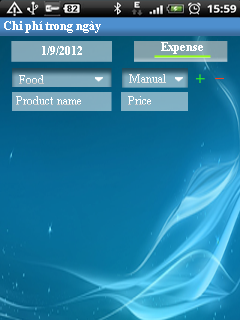
<style>
.page{position:relative;width:240px;height:320px}
.page>*{position:absolute;margin:0}
.t1{font:11.6px "TimesNewRomanPS-BoldMT";color:#ffffff}
.t2{font:11.6px "TimesNewRomanPSMT";color:#ffffff}
</style>
<div class="page">
<p class="t1" style="left:4px;top:21px;width:97px;height:12px">Chi phí trong ngày</p>
<p class="t1" style="left:42px;top:46px;width:40px;height:9px">1/9/2012</p>
<p class="t1" style="left:161px;top:42px;width:42px;height:12px">Expense</p>
<p class="t2" style="left:19px;top:75px;width:25px;height:9px">Food</p>
<p class="t2" style="left:129px;top:74px;width:37px;height:9px">Manual</p>
<p class="t2" style="left:16px;top:96px;width:65px;height:9px">Product name</p>
<p class="t2" style="left:128px;top:96px;width:23px;height:9px">Price</p>
</div>
